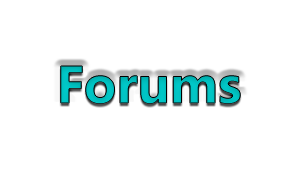
<style>
.page{position:relative;width:300px;height:170px;background:#ffffff}
.page>*{position:absolute;margin:0}
.t1{font:53px "SegoeUI-Bold";color:#00cccc}
</style>
<div class="page">
<p class="t1" style="left:60px;top:66px;width:181px;height:38px">Forums</p>
</div>
